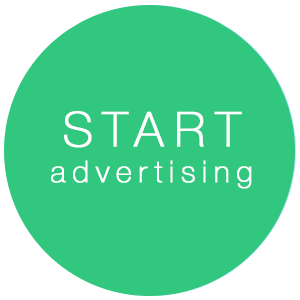
<style>
.page{position:relative;width:300px;height:300px;background:#31c77f}
.page>*{position:absolute;margin:0}
.t1{font:30px "HelveticaNeue-Thin";letter-spacing:0.2em;color:#ffffff;font-weight:bold}
.t2{font:48px "HelveticaNeue-Thin";letter-spacing:0.2em;color:#ffffff;font-weight:bold}
</style>
<div class="page">
<p class="t1" style="left:51px;top:111px;width:201px;height:78px;text-align:center"><span class="t2">START<br></span>advertising</p>
</div>
